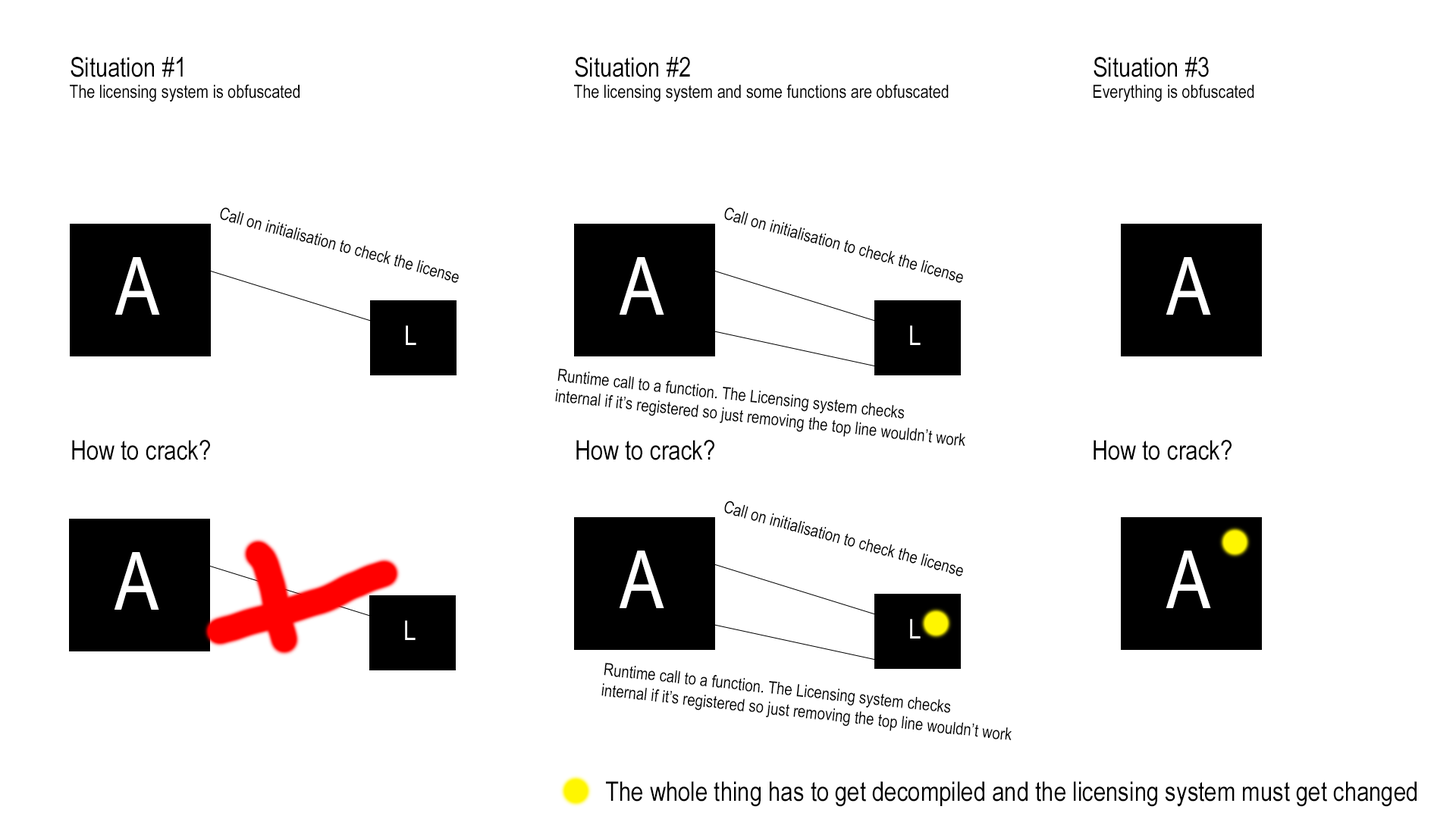
<style>
.page{position:relative;width:1456px;height:819px;background:#ffffff}
.page>*{position:absolute;margin:0}
.t1{font:27.1px "ArialNarrow";color:#000000}
.t2{font:18.2px "ArialNarrow";color:#000000}
.t3{font:17.2px "ArialNarrow";color:#000000}
.t4{font:80.3px "ArialNarrow";color:#ffffff}
.t5{font:27.1px "ArialNarrow";color:#ffffff}
</style>
<div class="page">
<p class="t1" style="left:71px;top:57px;width:112px;height:20px">Situation #1</p>
<p class="t1" style="left:575px;top:57px;width:115px;height:20px">Situation #2</p>
<p class="t1" style="left:1094px;top:57px;width:115px;height:20px">Situation #3</p>
<p class="t2" style="left:70px;top:84px;width:230px;height:18px">The licensing system is obfuscated</p>
<p class="t2" style="left:574px;top:84px;width:375px;height:18px">The licensing system and some functions are obfuscated</p>
<p class="t2" style="left:1094px;top:84px;width:160px;height:18px">Everything is obfuscated</p>
<p class="t3" style="left:220px;top:207px;width:239px;height:76px;rotate:15deg">Call on initialisation to check the license</p>
<p class="t3" style="left:724px;top:207px;width:239px;height:76px;rotate:15deg">Call on initialisation to check the license</p>
<p class="t4" style="left:115px;top:257px;width:45px;height:58px">A</p>
<p class="t4" style="left:620px;top:257px;width:44px;height:58px">A</p>
<p class="t4" style="left:1166px;top:257px;width:45px;height:58px">A</p>
<p class="t5" style="left:406px;top:325px;width:10px;height:20px">L</p>
<p class="t5" style="left:910px;top:325px;width:11px;height:20px">L</p>
<p class="t3" style="left:555px;top:369px;width:411px;height:77px;rotate:6deg">Runtime call to a function. The Licensing system checks<br>internal if it’s registered so just removing the top line wouldn’t work</p>
<p class="t1" style="left:72px;top:440px;width:138px;height:20px">How to crack?</p>
<p class="t1" style="left:576px;top:440px;width:138px;height:20px">How to crack?</p>
<p class="t1" style="left:1094px;top:440px;width:138px;height:20px">How to crack?</p>
<p class="t3" style="left:724px;top:500px;width:239px;height:76px;rotate:15deg">Call on initialisation to check the license</p>
<p class="t4" style="left:115px;top:552px;width:44px;height:58px">A</p>
<p class="t4" style="left:620px;top:551px;width:44px;height:57px">A</p>
<p class="t4" style="left:1166px;top:551px;width:45px;height:57px">A</p>
<p class="t5" style="left:405px;top:620px;width:11px;height:20px">L</p>
<p class="t5" style="left:910px;top:619px;width:11px;height:20px">L</p>
<p class="t3" style="left:601px;top:663px;width:411px;height:77px;rotate:6deg">Runtime call to a function. The Licensing system checks<br>internal if it’s registered so just removing the top line wouldn’t work</p>
<p class="t1" style="left:606px;top:781px;width:811px;height:26px">The whole thing has to get decompiled and the licensing system must get changed</p>
</div>
